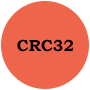
<style>
.page{position:relative;width:90px;height:90px;background:#ee654b}
.page>*{position:absolute;margin:0}
.t1{font:16px "BookmanOldStyle-Bold";color:#000000}
</style>
<div class="page">
<p class="t1" style="left:17px;top:39px;width:57px;height:13px">CRC32</p>
</div>
